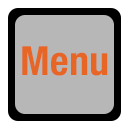
<style>
.page{position:relative;width:128px;height:128px;background:#b7b7b7}
.page>*{position:absolute;margin:0}
.t1{font:40.3px "HelveticaNeue-CondensedBold";color:#e76626}
</style>
<div class="page">
<p class="t1" style="left:22px;top:46px;width:86px;height:30px">Menu</p>
</div>
